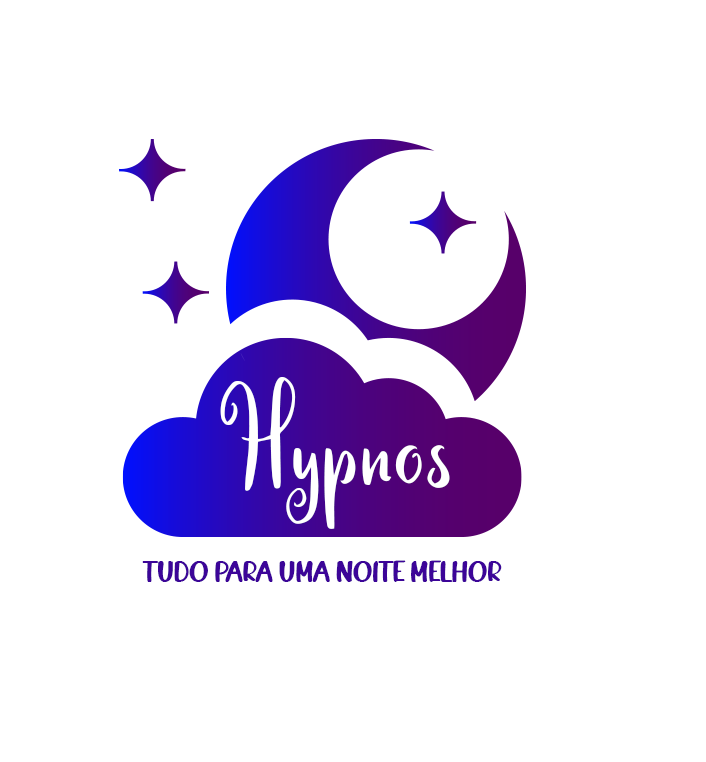
<style>
.page{position:relative;width:706px;height:762px;background:#ffffff}
.page>*{position:absolute;margin:0}
.t1{font:160.2px "Calinastiya-Demo";color:#ffffff}
.t2{font:19.4px "DelightCandles";letter-spacing:-0.03em;color:#3c0598;text-transform:uppercase;scale:1.14 1}
</style>
<div class="page">
<p class="t1" style="left:220px;top:377px;width:230px;height:152px">Hypnos</p>
<p class="t2" style="left:142px;top:560px;width:360px;height:22px">Tudo Para Uma Noite Melhor</p>
</div>
